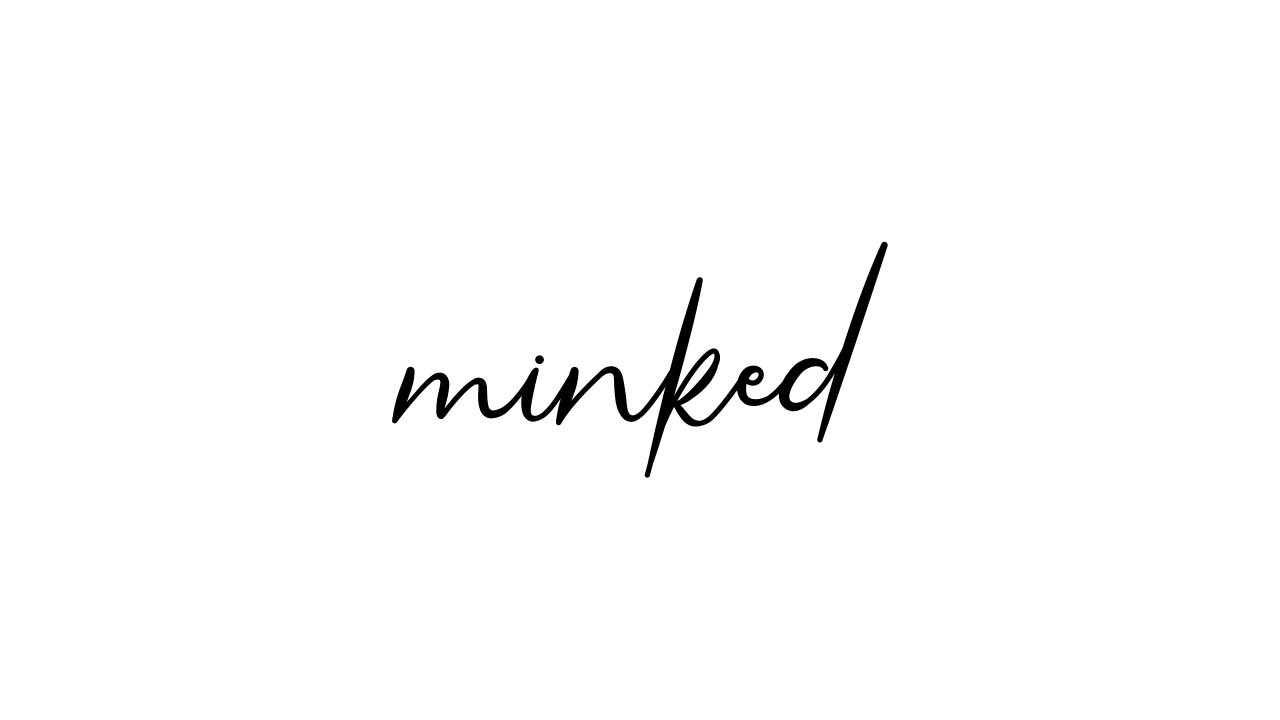
<style>
.page{position:relative;width:1280px;height:720px;background:#ffffff}
.page>*{position:absolute;margin:0}
.t1{font:200px "AmericansClassy";color:#000000}
</style>
<div class="page">
<p class="t1" style="left:392px;top:241px;width:496px;height:237px">minked</p>
</div>
